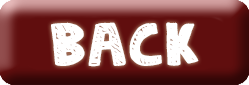
<style>
.page{position:relative;width:249px;height:85px}
.page>*{position:absolute;margin:0}
.t1{font:62.6px "DENNE|Sketchy";letter-spacing:-0.025em;color:#ffffff;scale:1.13 1}
</style>
<div class="page">
<p class="t1" style="left:51px;top:22px;width:148px;height:45px">BACK</p>
</div>
